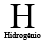
<style>
.page{position:relative;width:45px;height:42px;background:#ffffff}
.page>*{position:absolute;margin:0}
.t1{font:8px "TimesNewRomanPSMT";color:#000000}
.t2{font:34.7px "TimesNewRomanPSMT";color:#000000}
.t3{font:0px "TimesNewRomanPSMT";color:#000000}
</style>
<div class="page">
<p class="t1" style="left:4px;top:4px;width:37px;height:36px;text-align:center"><span class="t2">H<br></span>Hidrogênio<br><span class="t3">Helío</span></p>
</div>
